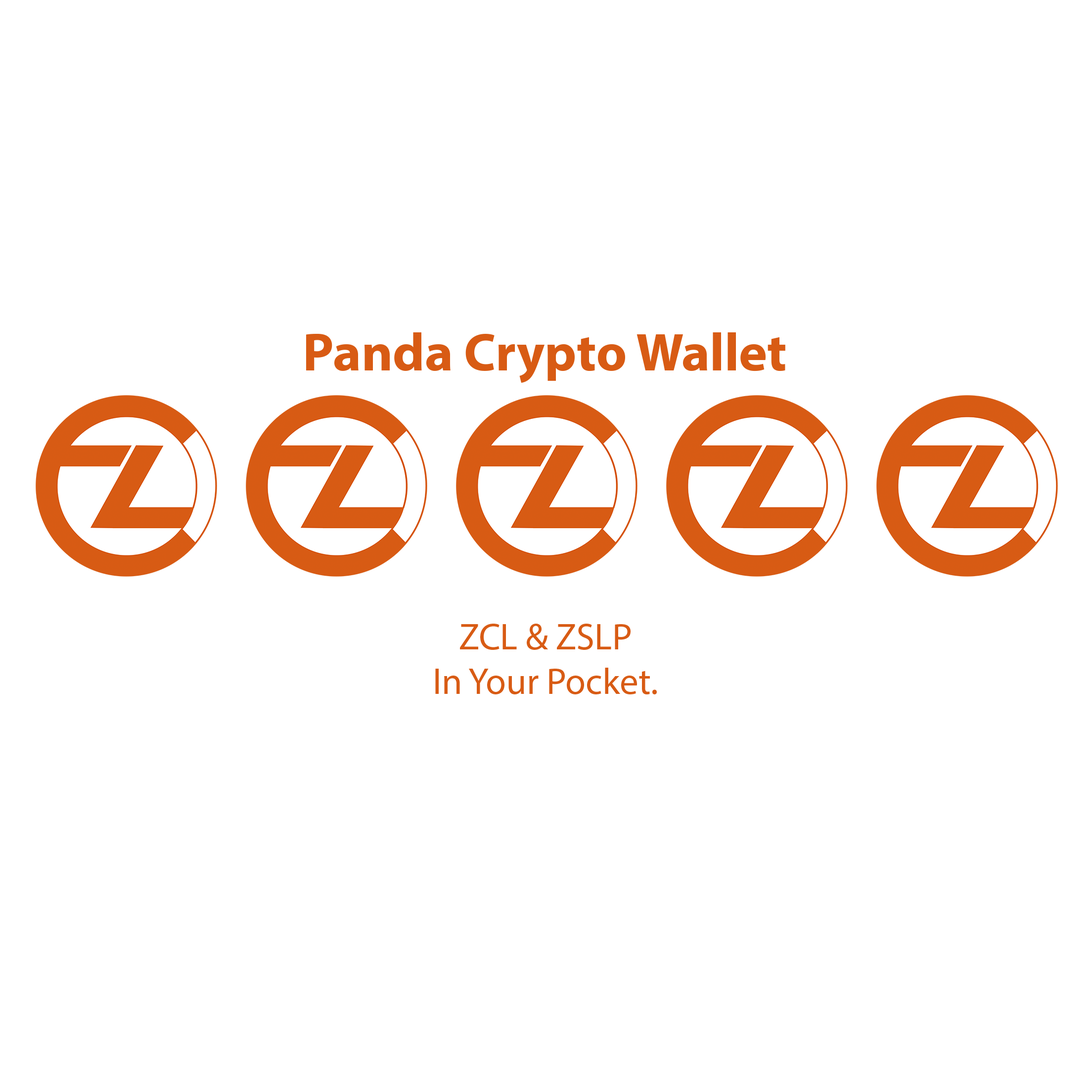
<style>
.page{position:relative;width:1092px;height:1092px;background:#ffffff}
.page>*{position:absolute;margin:0}
.t1{font:53.6px "MyriadPro-Bold";color:#d75b14}
.t2{font:37.1px "MyriadPro-Regular";color:#d75b14}
</style>
<div class="page">
<p class="t1" style="left:306px;top:332px;width:479px;height:51px">Panda Crypto Wallet</p>
<p class="t2" style="left:435px;top:624px;width:222px;height:70px;text-align:center">ZCL &amp; ZSLP<br>In Your Pocket.</p>
</div>
